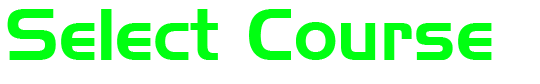
<style>
.page{position:relative;width:540px;height:84px;background:#ffffff}
.page>*{position:absolute;margin:0}
.t1{font:71.1px "HandelGothicBT-Regular";color:#00ff11}
</style>
<div class="page">
<p class="t1" style="left:7px;top:9px;width:485px;height:51px">Select Course</p>
</div>
